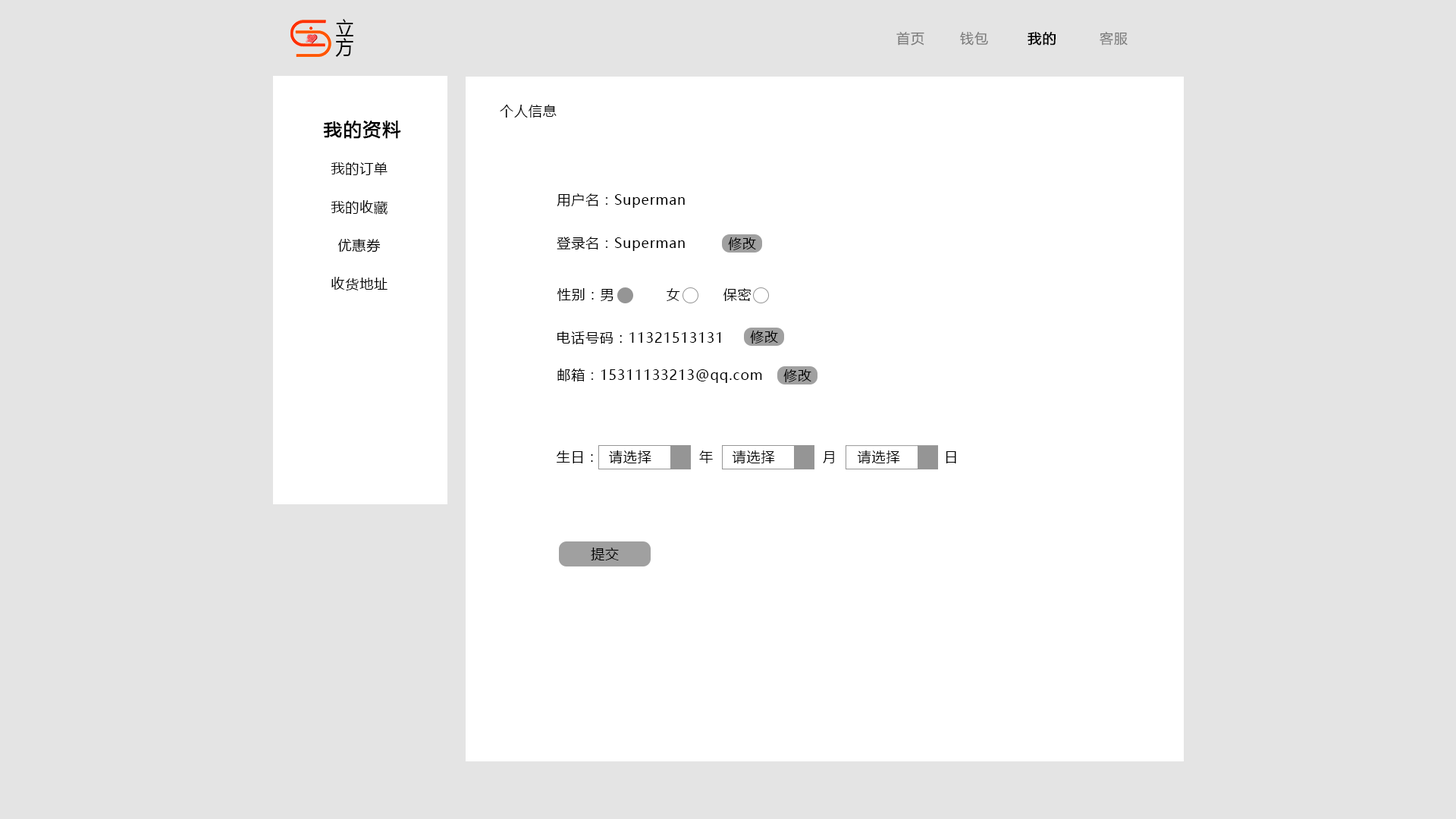
<style>
.page{position:relative;width:1456px;height:819px;background:#e4e4e4}
.page>*{position:absolute;margin:0}
.t1{font:18.2px/13.6px "MicrosoftYaHeiUI";letter-spacing:0.05em;color:#000000}
.t2{font:13.6px "MicrosoftYaHeiUI";letter-spacing:0.05em;color:#797979}
.t3{font:13.6px "MicrosoftYaHeiUI";letter-spacing:0.05em;color:#000000;font-weight:bold}
.t4{font:13.6px "MicrosoftYaHeiUI";letter-spacing:0.05em;color:#000000}
.t5{font:18.2px "MicrosoftYaHeiUI";letter-spacing:0.05em;color:#000000;font-weight:bold}
</style>
<div class="page">
<p class="t1" style="left:335px;top:19px;width:18px;height:38px">立方</p>
<p class="t2" style="left:896px;top:32px;width:28px;height:13px">首页</p>
<p class="t2" style="left:960px;top:32px;width:28px;height:13px">钱包</p>
<p class="t3" style="left:1028px;top:32px;width:28px;height:13px">我的</p>
<p class="t2" style="left:1100px;top:32px;width:28px;height:13px">客服</p>
<p class="t4" style="left:500px;top:105px;width:57px;height:13px">个人信息</p>
<p class="t5" style="left:323px;top:121px;width:78px;height:18px">我的资料</p>
<p class="t4" style="left:331px;top:162px;width:57px;height:13px">我的订单</p>
<p class="t4" style="left:557px;top:193px;width:128px;height:15px">用户名：Superman</p>
<p class="t4" style="left:331px;top:200px;width:57px;height:15px">我的收藏</p>
<p class="t4" style="left:337px;top:238px;width:44px;height:15px">优惠券</p>
<p class="t4" style="left:557px;top:237px;width:128px;height:14px">登录名：Superman</p>
<p class="t4" style="left:728px;top:237px;width:28px;height:13px">修改</p>
<p class="t4" style="left:331px;top:277px;width:57px;height:13px">收货地址</p>
<p class="t4" style="left:557px;top:288px;width:194px;height:13px">性别：男           女         保密</p>
<p class="t4" style="left:557px;top:331px;width:164px;height:13px">电话号码：11321513131</p>
<p class="t4" style="left:750px;top:331px;width:28px;height:13px">修改</p>
<p class="t4" style="left:557px;top:369px;width:205px;height:14px">邮箱：15311133213@qq.com</p>
<p class="t4" style="left:783px;top:369px;width:28px;height:13px">修改</p>
<p class="t4" style="left:557px;top:450px;width:399px;height:14px">生日：  请选择          年    请选择          月 请选择        日</p>
<p class="t4" style="left:591px;top:548px;width:28px;height:12px">提交</p>
</div>
